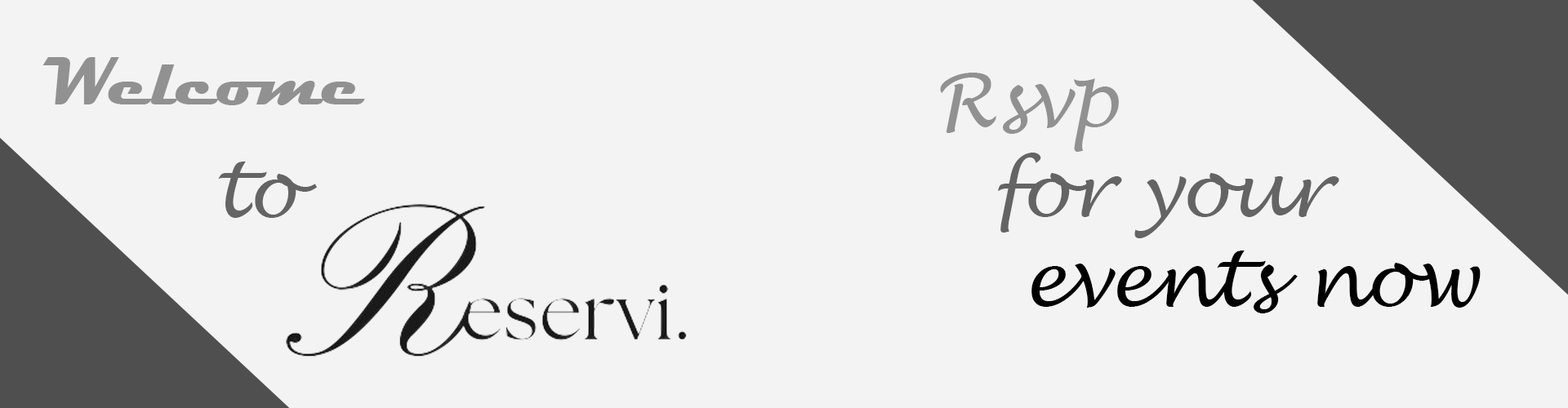
<style>
.page{position:relative;width:1568px;height:408px;background:#f3f3f3}
.page>*{position:absolute;margin:0}
.t1{font:68.3px "Magneto-Bold";color:#919191}
.t2{font:74.9px "LucidaHandwriting-Italic";color:#000000}
.t3{font:74.9px "LucidaHandwriting-Italic";color:#919191}
.t4{font:74.9px "LucidaHandwriting-Italic";color:#646464}
</style>
<div class="page">
<p class="t1" style="left:42px;top:57px;width:323px;height:48px">Welcome</p>
<p class="t2" style="left:940px;top:73px;width:541px;height:241px"><span class="t3">Rsvp <br></span><span class="t4">  for your<br>   </span>events now</p>
<p class="t4" style="left:218px;top:162px;width:99px;height:56px">to</p>
</div>
